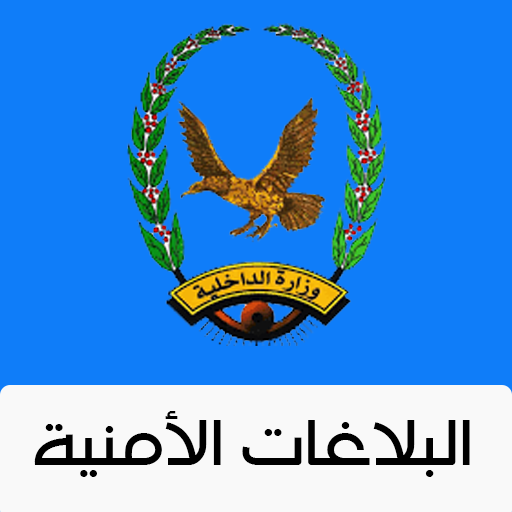
<style>
.page{position:relative;width:512px;height:512px;background:#0f7df9}
.page>*{position:absolute;margin:0}
.t1{font:76px "HacenJordan";color:#000000}
</style>
<div class="page">
<p class="t1" style="left:34px;top:411px;width:436px;height:66px">البلاغات الأمنية</p>
</div>
